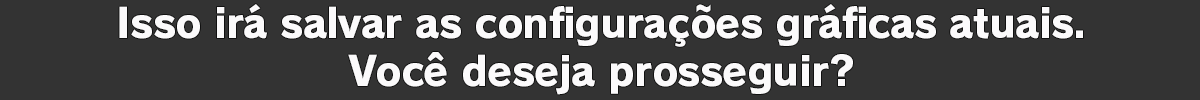
<style>
.page{position:relative;width:1200px;height:100px;background:#333333}
.page>*{position:absolute;margin:0}
.t1{font:40px "RodinPro-EB";letter-spacing:-0.018em;color:#fbfafb}
.t2{font:40px "RodinPro-EB";letter-spacing:-0.015em;color:#fbfafb}
</style>
<div class="page">
<p class="t1" style="left:119px;top:4px;width:964px;height:43px">Isso irá salvar as configurações gráficas atuais.</p>
<p class="t2" style="left:348px;top:52px;width:505px;height:43px">Você deseja prosseguir?</p>
</div>
